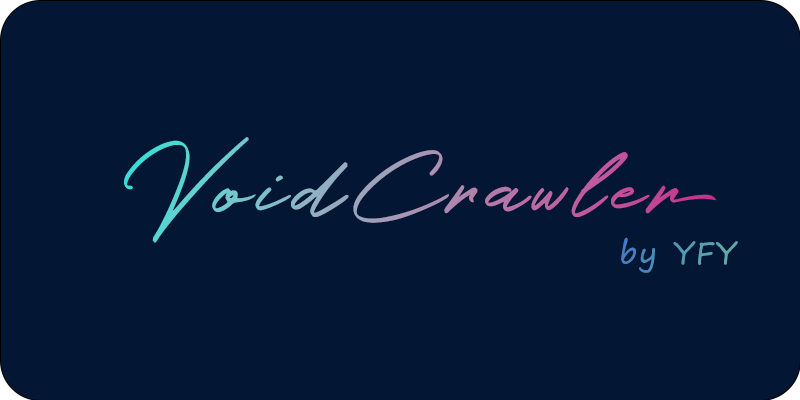
<style>
.page{position:relative;width:800px;height:400px;background:#031634}
.page>*{position:absolute;margin:0}
.t1{font:110px "Holland";letter-spacing:0.075em}
.t2{font:30px "SegoePrint";letter-spacing:0.075em;color:#5397b5}
</style>
<div class="page">
<p class="t1" style="left:124px;top:137px;width:593px;height:106px">VoidCrawler</p>
<p class="t2" style="left:621px;top:237px;width:117px;height:36px">by YFY</p>
</div>
